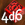
<style>
.page{position:relative;width:25px;height:25px}
.page>*{position:absolute;margin:0}
.t1{font:15.9px "Corbel";color:#ffffff;scale:0.94 1}
.t2{font:12px "Corbel";color:#ffffff;scale:0.94 1}
</style>
<div class="page">
<p class="t1" style="left:1px;top:9px;width:22px;height:15px">4<span class="t2">d</span>6</p>
</div>
